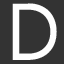
<style>
.page{position:relative;width:64px;height:64px;background:#333333}
.page>*{position:absolute;margin:0}
.t1{font:72px "LEMONMILK-Light";letter-spacing:-0.065em;color:#fefefe}
</style>
<div class="page">
<p class="t1" style="left:12px;top:3px;width:45px;height:57px">D</p>
</div>
